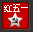
<style>
.page{position:relative;width:33px;height:32px;background:#c50000}
.page>*{position:absolute;margin:0}
.t1{font:10.4px "SimSun";letter-spacing:-0.25em;color:#ffffff}
</style>
<div class="page">
<p class="t1" style="left:4px;top:4px;width:24px;height:8px">红五一</p>
</div>
